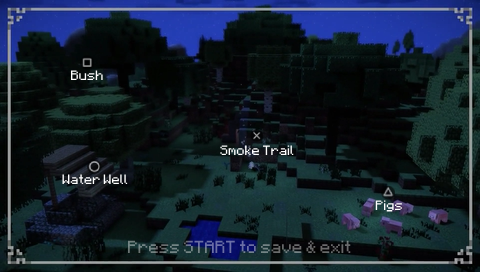
<style>
.page{position:relative;width:480px;height:272px}
.page>*{position:absolute;margin:0}
.t1{font:11px "Minecraft";color:#ffffff}
.t2{font:14px "Minecraft"}
</style>
<div class="page">
<p class="t1" style="left:71px;top:70px;width:32px;height:10px">Bush</p>
<p class="t1" style="left:220px;top:145px;width:74px;height:10px">Smoke Trail</p>
<p class="t1" style="left:62px;top:174px;width:66px;height:10px">Water Well</p>
<p class="t1" style="left:375px;top:200px;width:27px;height:12px">Pigs</p>
<p class="t2" style="left:128px;top:240px;width:223px;height:13px">Press START to save &amp; exit</p>
</div>
